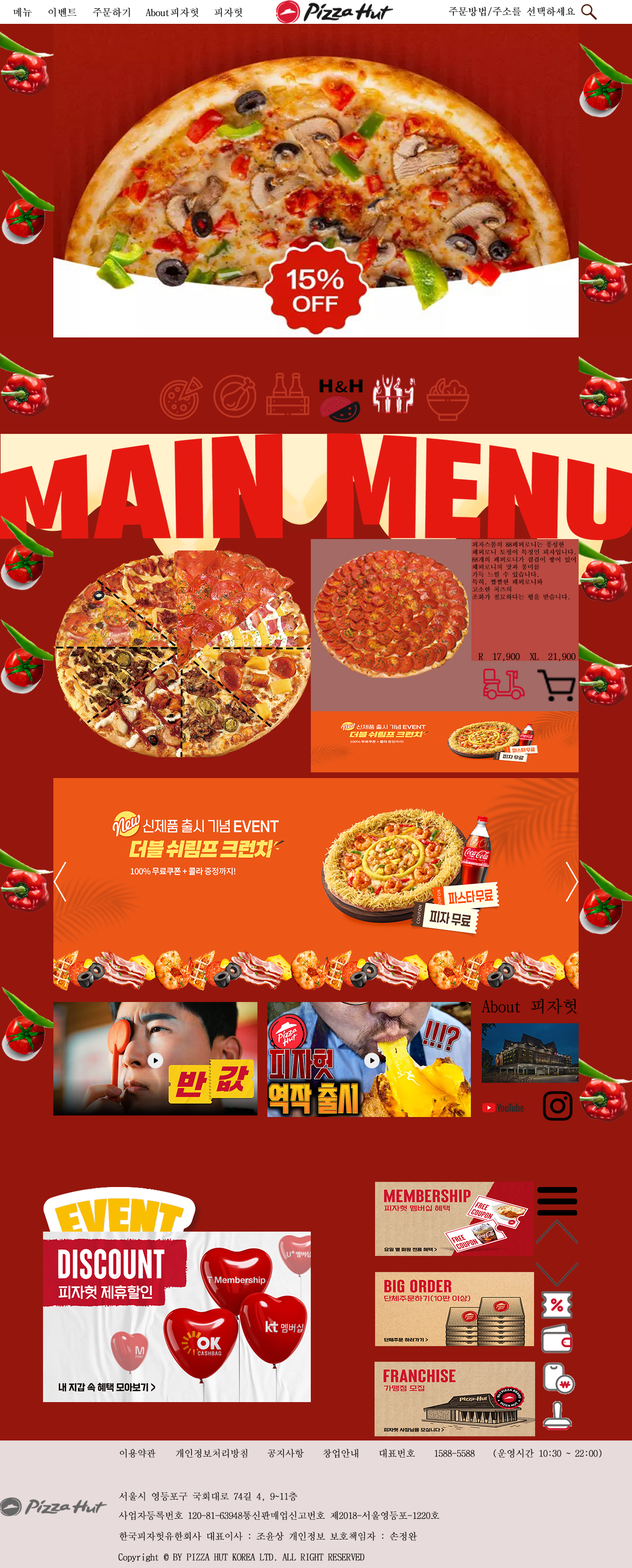
<style>
.page{position:relative;width:632px;height:1568px;background:#95160d}
.page>*{position:absolute;margin:0}
.t1{font:9.8px "BatangChe";letter-spacing:-0.035em;color:#010000;font-weight:bold}
.t2{font:9.8px "BatangChe";letter-spacing:-0.035em;color:#000000;font-weight:bold}
.t3{font:6.2px "BatangChe";letter-spacing:-0.035em;color:#040404;font-weight:bold}
.t4{font:9.3px "BatangChe";letter-spacing:-0.035em;color:#040404;font-weight:bold}
.t5{font:16.3px "BatangChe";letter-spacing:-0.035em;color:#000000;font-weight:bold}
.t6{font:9.3px "BatangChe";letter-spacing:-0.035em;color:#010000;font-weight:bold}
</style>
<div class="page">
<p class="t1" style="left:13px;top:8px;width:19px;height:9px">메뉴</p>
<p class="t1" style="left:48px;top:8px;width:29px;height:9px">이벤트</p>
<p class="t1" style="left:93px;top:8px;width:37px;height:9px">주문하기</p>
<p class="t1" style="left:146px;top:8px;width:53px;height:9px">About피자헛</p>
<p class="t1" style="left:215px;top:8px;width:28px;height:9px">피자헛</p>
<p class="t2" style="left:449px;top:7px;width:126px;height:10px">주문방법/주소를 선택하세요</p>
<p class="t3" style="left:472px;top:541px;width:104px;height:59px">피자스톰의 88페퍼로니는 풍성한<br>페퍼로니 토핑이 특징인 피자입니다.<br>88개의 페퍼로니가 겹겹이 쌓여 있어<br>페퍼로니의 맛과 풍미를<br>가득 느낄 수 있습니다.<br>특히, 짭짤한 페퍼로니와<br>고소한 치즈의<br>조화가 절묘하다는 평을 받습니다.</p>
<p class="t4" style="left:478px;top:653px;width:42px;height:8px">R  17,900</p>
<p class="t4" style="left:530px;top:653px;width:46px;height:8px">XL  21,900</p>
<p class="t5" style="left:482px;top:998px;width:95px;height:16px">About 피자헛</p>
<p class="t6" style="left:120px;top:1449px;width:36px;height:9px">이용약관</p>
<p class="t6" style="left:176px;top:1449px;width:72px;height:9px">개인정보처리방침</p>
<p class="t6" style="left:267px;top:1449px;width:37px;height:9px">공지사항</p>
<p class="t6" style="left:323px;top:1449px;width:36px;height:9px">창업안내</p>
<p class="t6" style="left:379px;top:1449px;width:36px;height:9px">대표번호</p>
<p class="t6" style="left:435px;top:1450px;width:40px;height:7px">1588-5588</p>
<p class="t6" style="left:494px;top:1449px;width:108px;height:9px">(운영시간 10:30 ~ 22:00)</p>
<p class="t6" style="left:119px;top:1492px;width:179px;height:9px">서울시 영등포구 국회대로 74길 4, 9~11층</p>
<p class="t6" style="left:119px;top:1511px;width:321px;height:9px">사업자등록번호 120-81-63948통신판매업신고번호 제2018-서울영등포-1220호</p>
<p class="t6" style="left:119px;top:1532px;width:298px;height:9px">한국피자헛유한회사 대표이사 : 조윤상 개인정보 보호책임자 : 손정완</p>
<p class="t6" style="left:118px;top:1553px;width:247px;height:9px">Copyright © BY PIZZA HUT KOREA LTD. ALL RIGHT RESERVED</p>
</div>
